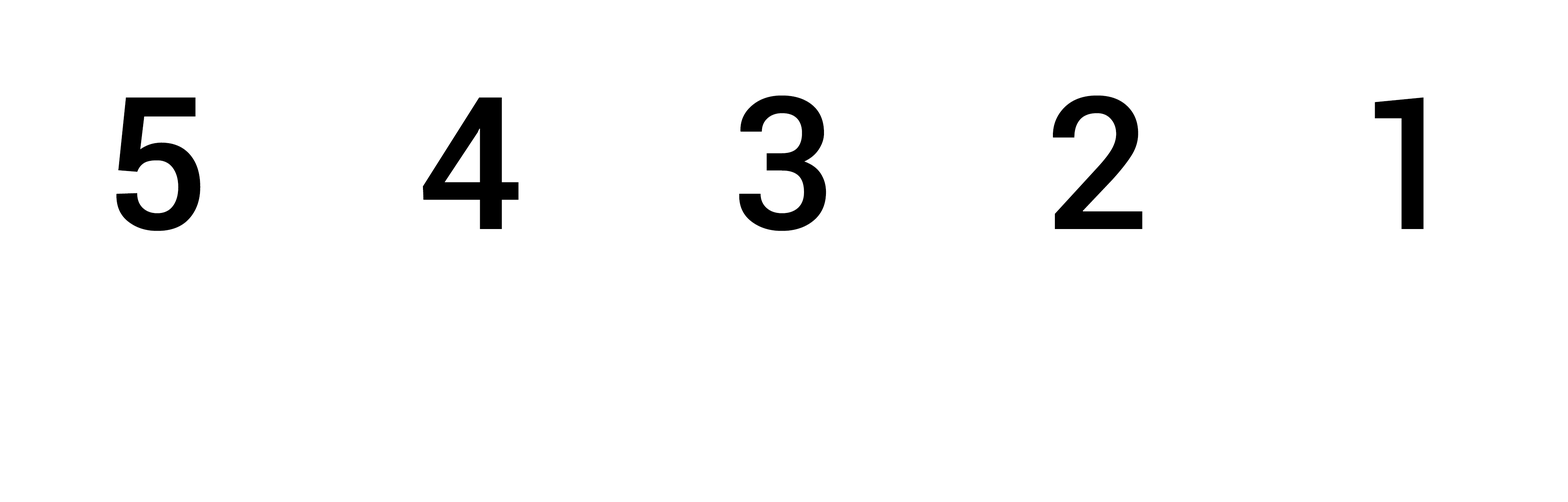
<style>
.page{position:relative;width:1568px;height:502px;background:#ffffff}
.page>*{position:absolute;margin:0}
.t1{font:185px "Roboto-Medium";letter-spacing:0.05em;color:#000000}
</style>
<div class="page">
<p class="t1" style="left:116px;top:97px;width:84px;height:134px">5</p>
<p class="t1" style="left:423px;top:97px;width:96px;height:132px">4</p>
<p class="t1" style="left:739px;top:95px;width:87px;height:136px">3</p>
<p class="t1" style="left:1053px;top:95px;width:89px;height:134px">2</p>
<p class="t1" style="left:1375px;top:97px;width:49px;height:132px">1</p>
</div>
